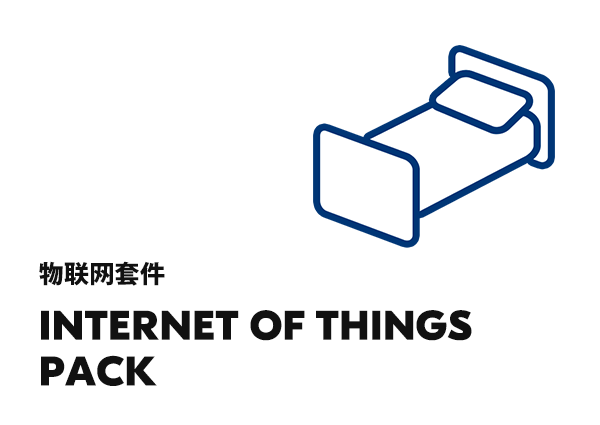
<style>
.page{position:relative;width:600px;height:425px;background:#ffffff}
.page>*{position:absolute;margin:0}
.t1{font:24.9px "KozGoPr6N-Heavy";letter-spacing:0.01em;color:#111111}
.t2{font:24.9px "NotoSansHans-Black";letter-spacing:0.01em;color:#111111}
.t3{font:41.5px/45.7px "GTEestiProDisplayTrial-UltraBold";letter-spacing:0.01em;color:#111111}
</style>
<div class="page">
<p class="t1" style="left:39px;top:261px;width:126px;height:25px">物<span class="t2">联</span>网套件</p>
<p class="t3" style="left:41px;top:310px;width:431px;height:76px">INTERNET OF THINGS<br>PACK</p>
</div>
